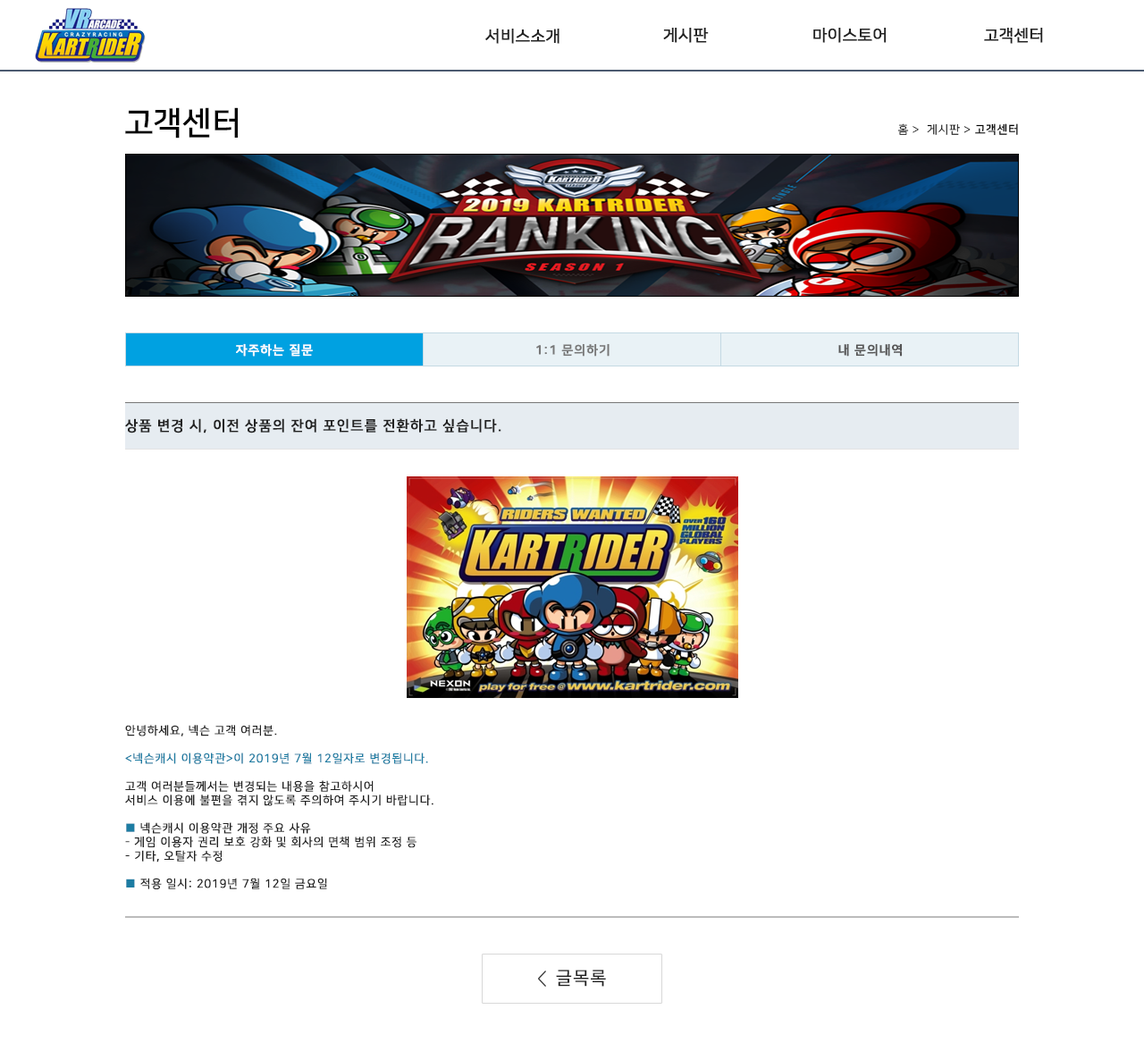
<style>
.page{position:relative;width:1144px;height:1043px;background:#ffffff}
.page>*{position:absolute;margin:0}
.t1{font:16.1px "NanumSquareR";color:#222222;font-weight:bold}
.t2{font:32.2px "NanumSquareB";color:#000000}
.t3{font:11.6px "NanumSquareR";letter-spacing:0.05em;color:#000000}
.t4{font:11.6px "NanumSquareL";letter-spacing:0.05em;color:#000000}
.t5{font:11.6px "NanumSquareB";letter-spacing:0.05em;color:#000000}
.t6{font:12.5px "NanumSquareB";letter-spacing:0.05em;color:#ffffff;font-weight:bold}
.t7{font:12.5px "NanumSquareB";letter-spacing:0.05em;color:#777777;font-weight:bold}
.t8{font:12.5px "NanumSquareB";letter-spacing:0.05em;color:#555555;font-weight:bold}
.t9{font:14.3px "NanumSquareB";letter-spacing:0.05em;color:#222222;text-transform:uppercase;font-weight:bold}
.t10{font:11.6px "NanumSquareR";letter-spacing:0.05em;color:#222222;text-transform:uppercase;font-weight:bold}
.t11{font:11.6px "NanumSquareR";letter-spacing:0.05em;color:#1d7da3;text-transform:uppercase;font-weight:bold}
.t12{font:17.9px "NanumSquareR";letter-spacing:0.05em;color:#222222;text-transform:uppercase;font-weight:bold}
</style>
<div class="page">
<p class="t1" style="left:485px;top:28px;width:74px;height:16px">서비스소개</p>
<p class="t1" style="left:663px;top:27px;width:46px;height:16px">게시판</p>
<p class="t1" style="left:813px;top:27px;width:73px;height:16px">마이스토어</p>
<p class="t1" style="left:984px;top:27px;width:59px;height:16px">고객센터</p>
<p class="t2" style="left:125px;top:107px;width:113px;height:31px">고객센터</p>
<p class="t3" style="left:897px;top:123px;width:121px;height:13px">홈 <span class="t4">&gt; </span> 게시판 &gt; <span class="t5">고객센터</span></p>
<p class="t6" style="left:236px;top:343px;width:77px;height:13px">자주하는 질문</p>
<p class="t7" style="left:536px;top:343px;width:73px;height:13px">1:1 문의하기</p>
<p class="t8" style="left:838px;top:343px;width:64px;height:13px">내 문의내역</p>
<p class="t9" style="left:125px;top:418px;width:376px;height:15px">상품 변경 시, 이전 상품의 잔여 포인트를 전환하고 싶습니다.</p>
<p class="t10" style="left:125px;top:725px;width:308px;height:164px">안녕하세요, 넥슨 고객 여러분.<br><br><span class="t11">&lt;넥슨캐시 이용약관&gt;이 2019년 7월 12일자로 변경됩니다.<br></span><br>고객 여러분들께서는 변경되는 내용을 참고하시어<br>서비스 이용에 불편을 겪지 않도록 주의하여 주시기 바랍니다.<br><br><span class="t11">■</span> 넥슨캐시 이용약관 개정 주요 사유<br>- 게임 이용자 권리 보호 강화 및 회사의 면책 범위 조정 등<br>- 기타, 오탈자 수정<br><br><span class="t11">■</span> 적용 일시: 2019년 7월 12일 금요일</p>
<p class="t12" style="left:556px;top:969px;width:50px;height:17px">글목록</p>
</div>
